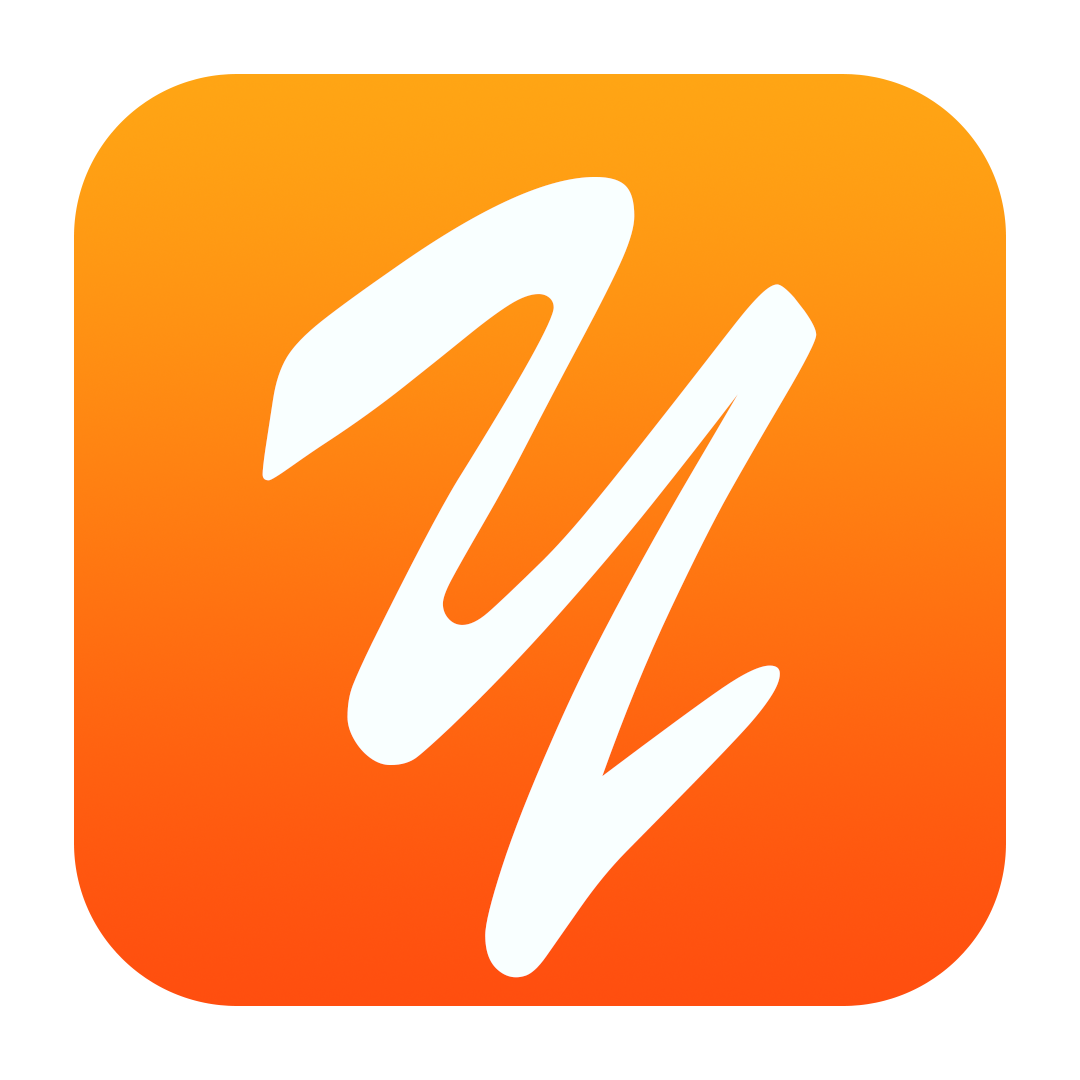
<style>
.page{position:relative;width:1080px;height:1080px;background:#ffffff}
.page>*{position:absolute;margin:0}
.t1{font:887.2px "BrushScriptMT";color:#f9ffff}
</style>
<div class="page">
<p class="t1" style="left:262px;top:177px;width:555px;height:801px">Y</p>
</div>
